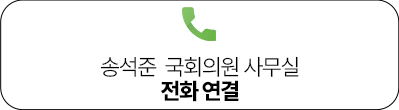
<style>
.page{position:relative;width:399px;height:110px;background:#ffffff}
.page>*{position:absolute;margin:0}
.t1{font:22.8px/23.5px "Pretendard-Light";letter-spacing:-0.05em;color:#000000}
.t2{font:22.8px/23.5px "Pretendard-ExtraBold";letter-spacing:-0.05em;color:#000000}
</style>
<div class="page">
<p class="t1" style="left:100px;top:56px;width:199px;height:46px;text-align:center">송석준  국회의원 사무실<br><span class="t2">전화 연결</span></p>
</div>
